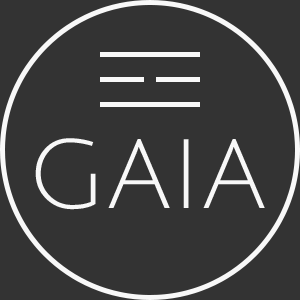
<style>
.page{position:relative;width:300px;height:300px;background:#333333}
.page>*{position:absolute;margin:0}
.t1{font:96px "JuliusSansOne-Regular";color:#f8f8f8}
</style>
<div class="page">
<p class="t1" style="left:35px;top:138px;width:230px;height:72px">GAIA</p>
</div>
